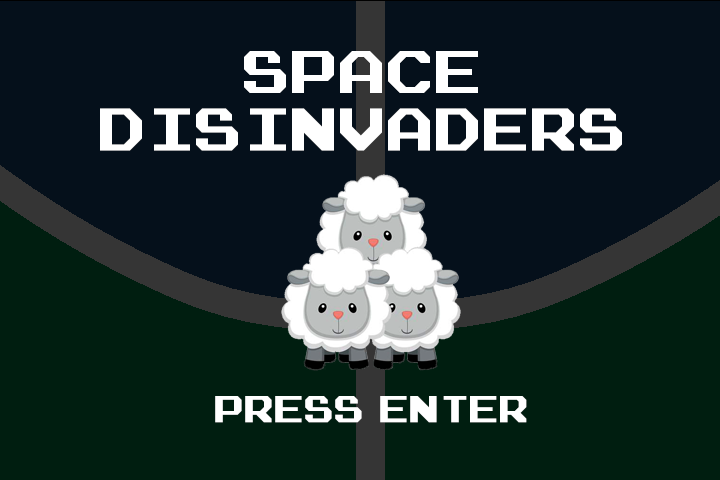
<style>
.page{position:relative;width:720px;height:480px;background:#05101b}
.page>*{position:absolute;margin:0}
.t1{font:48px "Atari-Font-Full-Version";color:#ffffff}
.t2{font:30px "Atari-Font-Full-Version";color:#ffffff}
</style>
<div class="page">
<p class="t1" style="left:100px;top:51px;width:522px;height:100px;text-align:center">SPACE<br>DISINVADERS</p>
<p class="t2" style="left:215px;top:396px;width:312px;height:27px">PRESS ENTER</p>
</div>
